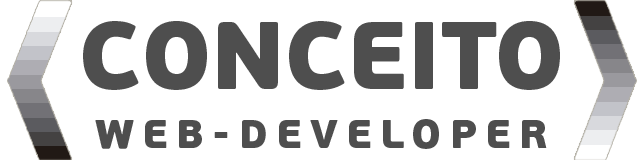
<style>
.page{position:relative;width:640px;height:160px;background:#ffffff}
.page>*{position:absolute;margin:0}
.t1{font:95.1px "PFBeauSansPro-Black";letter-spacing:-0.01em;color:#4e4e4e;text-transform:uppercase}
.t2{font:40.7px "PFBeauSansPro-Black";letter-spacing:0.2em;color:#4e4e4e;text-transform:uppercase}
.t3{font:54.2px "PFBeauSansPro-Black";letter-spacing:0.2em;color:#4e4e4e;text-transform:uppercase}
</style>
<div class="page">
<p class="t1" style="left:83px;top:21px;width:477px;height:69px">Conceito</p>
<p class="t2" style="left:95px;top:119px;width:452px;height:30px"><span class="t3"><br></span>web-developer</p>
</div>
